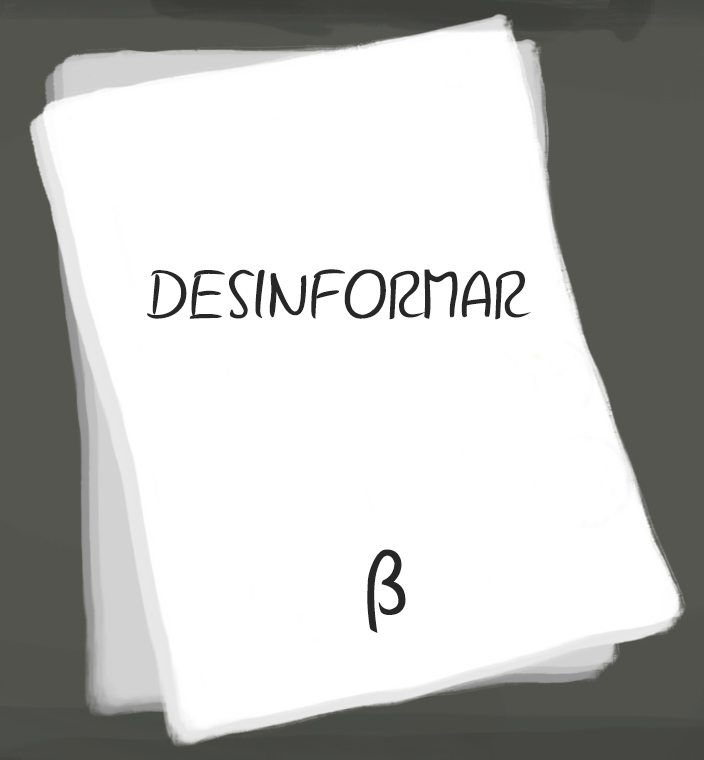
<style>
.page{position:relative;width:704px;height:760px;background:#ffffff}
.page>*{position:absolute;margin:0}
.t1{font:70px "GunnyRewritten";color:#272727;scale:1.1 1}
.t2{font:100px "GunnyRewritten";color:#272727;scale:1.1 1}
</style>
<div class="page">
<p class="t1" style="left:147px;top:269px;width:384px;height:51px">DESINFORMAR</p>
<p class="t2" style="left:367px;top:549px;width:39px;height:84px">β</p>
</div>
